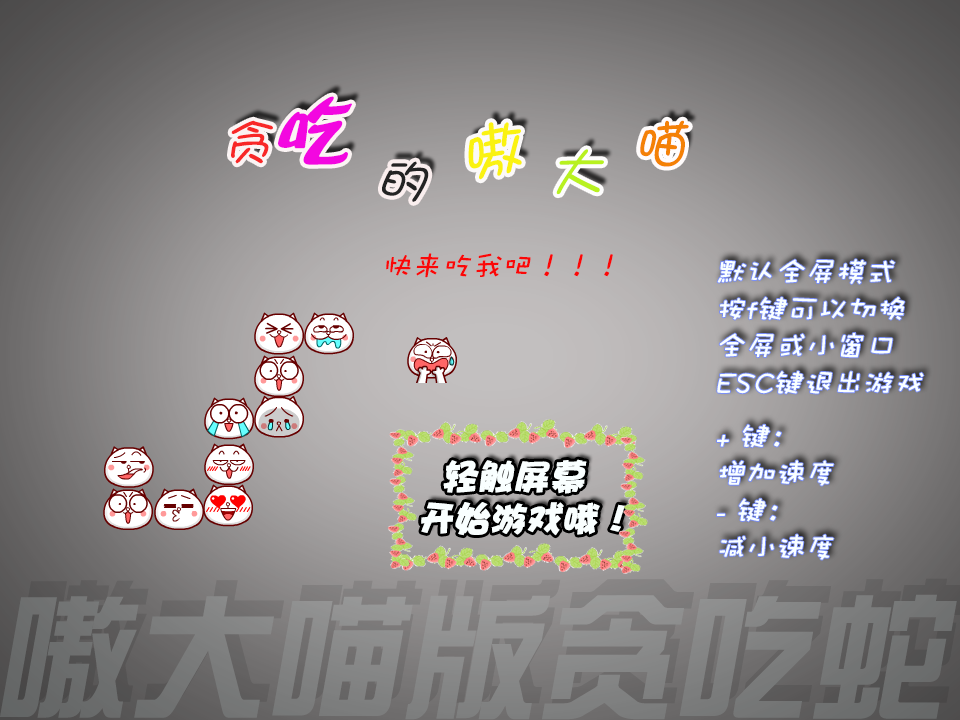
<style>
.page{position:relative;width:960px;height:720px}
.page>*{position:absolute;margin:0}
.t1{font:48px "DFPShaoNvW5";color:#f82727;font-style:italic}
.t2{font:77px "DFPBuDingW12";color:#f307e0;font-style:italic}
.t3{font:63px "DFPShaoNvW5";color:#faf211;font-style:italic}
.t4{font:53px "DFPShaoNvW5";color:#f48106;font-style:italic}
.t5{font:53px "DFPShaoNvW5";color:#b8f120;font-style:italic}
.t6{font:48px "DFPShaoNvW5";color:#232323;font-style:italic}
.t7{font:30px "DFPWaWaW5";color:#fa0707;font-style:italic}
.t8{font:30px/37px "DFPWaWaW5";color:#f9ffff;font-style:italic}
.t9{font:36px/42px "DFPHaiBaoW12";color:#f9ffff;font-style:italic}
.t10{font:136px "DFPZongYiW7";color:#7f8080;font-style:italic}
</style>
<div class="page">
<p class="t1" style="left:231px;top:96px;width:121px;height:69px">贪<span class="t2">吃</span></p>
<p class="t3" style="left:468px;top:122px;width:54px;height:58px;rotate:-13deg">嗷</p>
<p class="t4" style="left:640px;top:120px;width:49px;height:47px">喵</p>
<p class="t5" style="left:556px;top:149px;width:48px;height:46px">大</p>
<p class="t6" style="left:382px;top:161px;width:47px;height:41px;rotate:10deg">的</p>
<p class="t7" style="left:386px;top:253px;width:227px;height:25px">快来吃我吧！！！</p>
<p class="t8" style="left:717px;top:259px;width:207px;height:135px">默认全屏模式<br>按f键可以切换<br>全屏或小窗口<br>ESC键退出游戏</p>
<p class="t8" style="left:717px;top:424px;width:117px;height:136px">+ 键：<br>增加速度<br>- 键：<br>减小速度</p>
<p class="t9" style="left:421px;top:459px;width:204px;height:77px">轻触屏幕<br>开始游戏哦！</p>
<p class="t10" style="left:0px;top:594px;width:957px;height:126px">嗷大喵版贪吃蛇</p>
</div>
